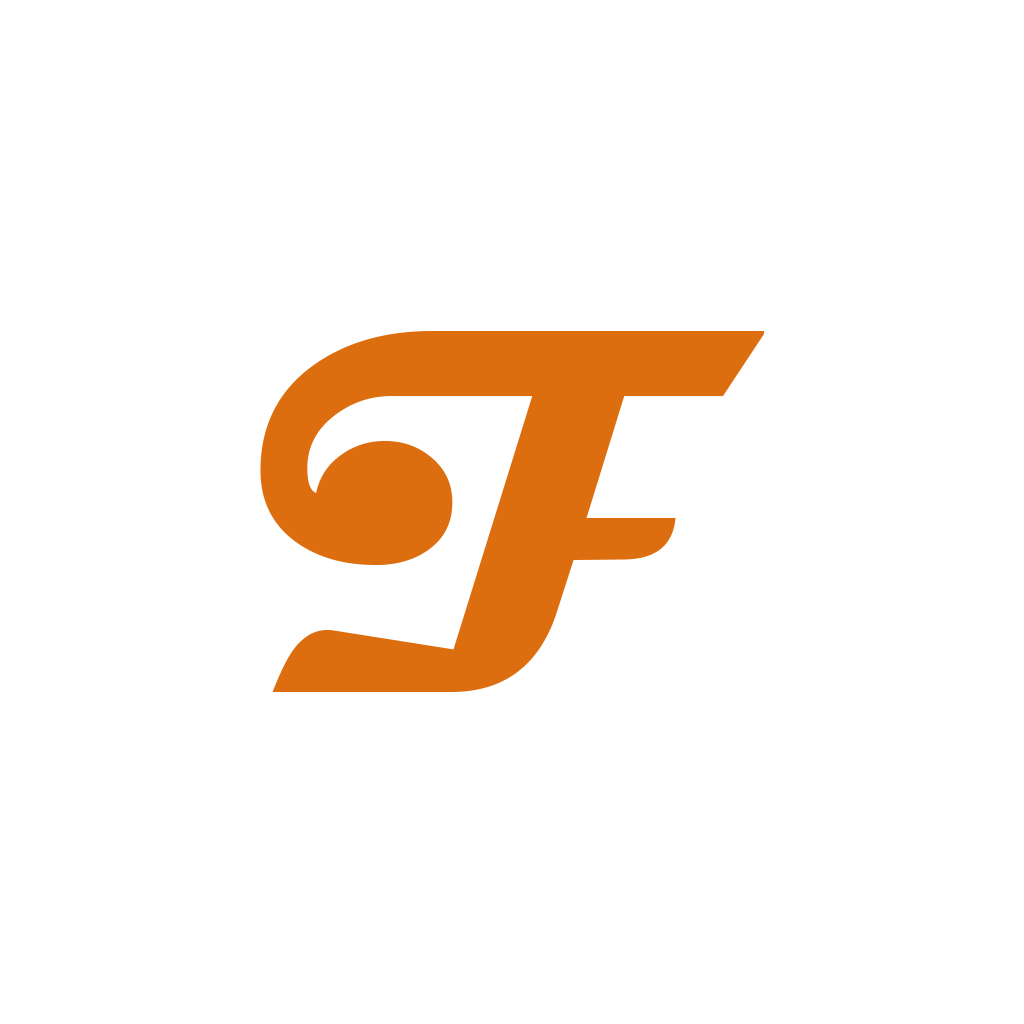
<style>
.page{position:relative;width:1024px;height:1024px;background:#ffffff}
.page>*{position:absolute;margin:0}
.t1{font:525px "Magneto-Bold";color:#dd6e0f}
</style>
<div class="page">
<p class="t1" style="left:260px;top:331px;width:504px;height:361px">F</p>
</div>
